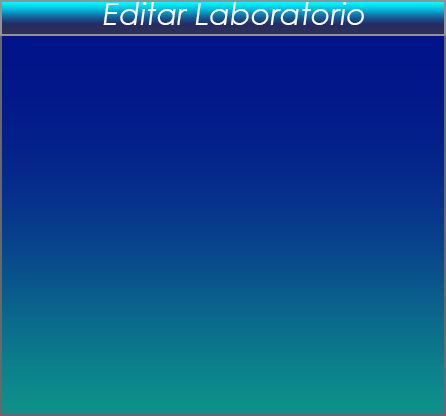
<style>
.page{position:relative;width:446px;height:416px}
.page>*{position:absolute;margin:0}
.t1{font:30.5px "CenturyGothic-Italic";color:#fdfdfd}
</style>
<div class="page">
<p class="t1" style="left:103px;top:2px;width:261px;height:23px">Editar Laboratorio</p>
</div>
